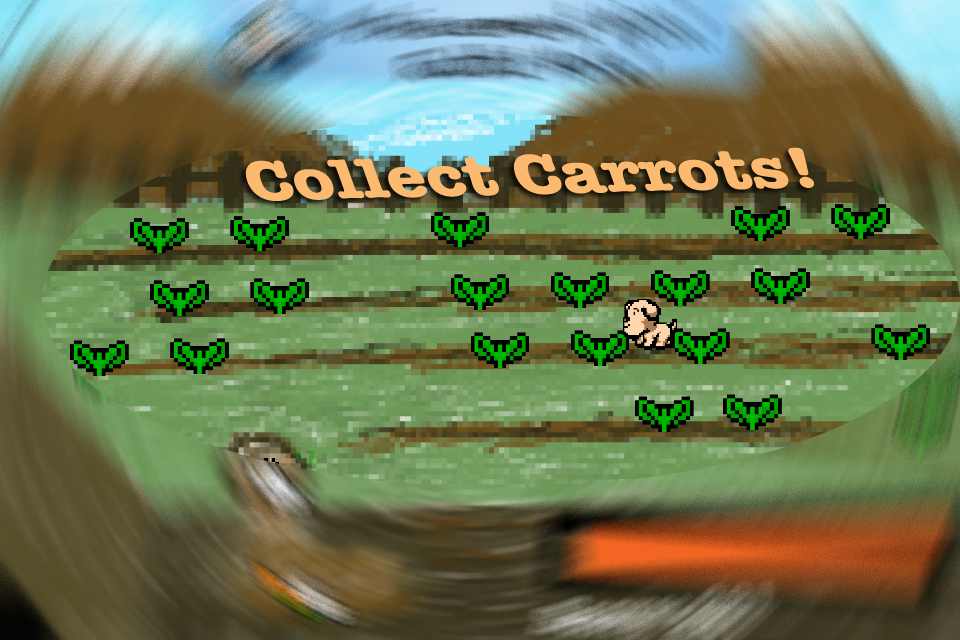
<style>
.page{position:relative;width:960px;height:640px}
.page>*{position:absolute;margin:0}
.t1{font:60.6px "AmericanTypewriter-Bold";color:#fcb970;scale:1.2 1}
</style>
<div class="page">
<p class="t1" style="left:245px;top:147px;width:569px;height:54px;rotate:-1deg">Collect Carrots!</p>
</div>
